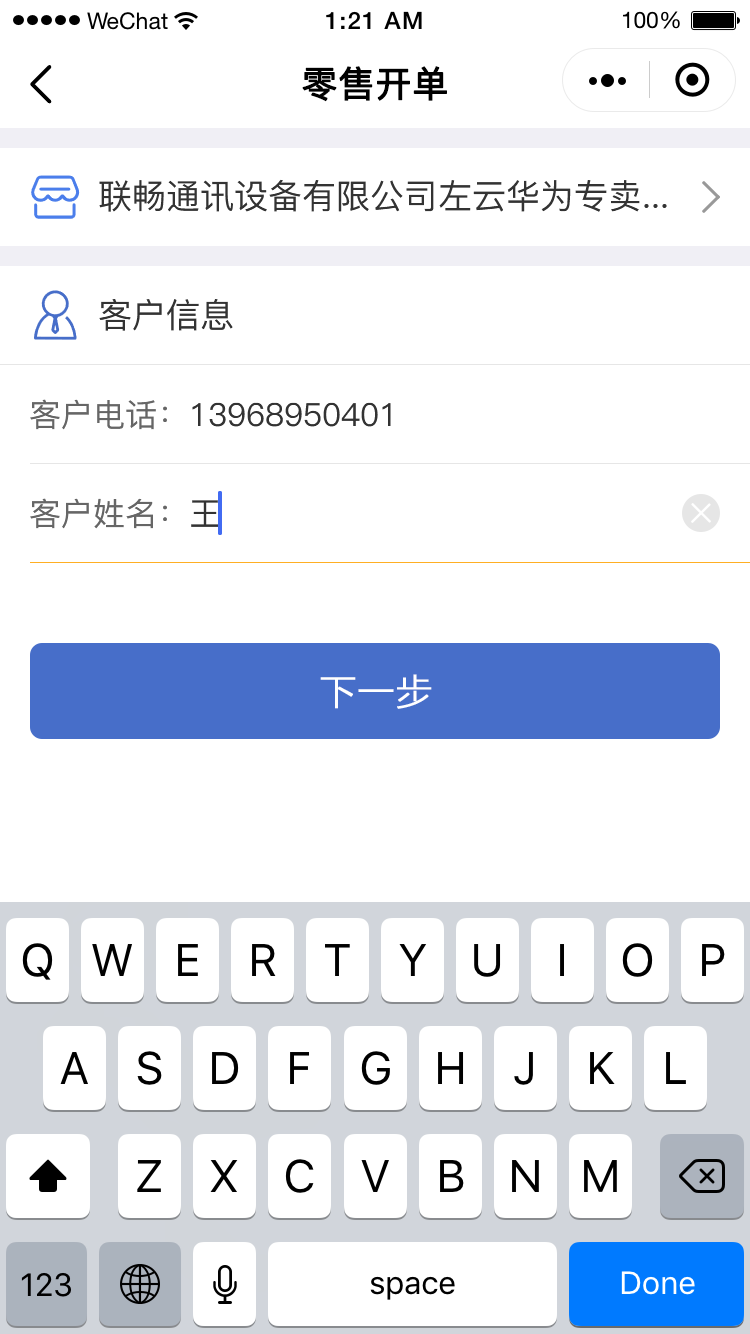
<style>
.page{position:relative;width:750px;height:1334px;background:#ffffff}
.page>*{position:absolute;margin:0}
.t1{font:36px "PingFang-SC-Medium";color:#000000;font-weight:bold}
.t2{font:34px "PingFang-SC-Medium";color:#333333}
.t3{font:32px "PingFang-SC-Medium";color:#333333}
.t4{font:32px "PingFang-SC-Medium";color:#666666}
.t5{font:36px "STHeitiSC-Medium";color:#ffffff;font-weight:bold}
</style>
<div class="page">
<p class="t1" style="left:302px;top:66px;width:145px;height:36px">零售开单</p>
<p class="t2" style="left:99px;top:179px;width:568px;height:33px">联畅通讯设备有限公司左云华为专卖...</p>
<p class="t2" style="left:99px;top:299px;width:134px;height:32px">客户信息</p>
<p class="t3" style="left:30px;top:399px;width:361px;height:31px"><span class="t4">客户电话：</span>13968950401</p>
<p class="t4" style="left:30px;top:498px;width:189px;height:31px">客户姓名：<span class="t3">王</span></p>
<p class="t5" style="left:320px;top:674px;width:112px;height:35px">下一步</p>
</div>
